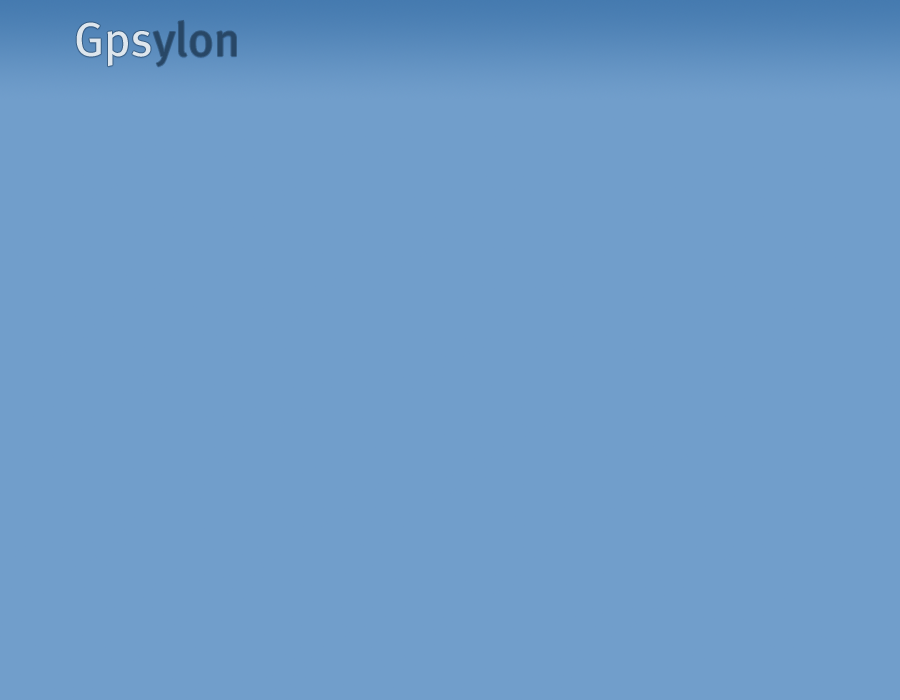
<style>
.page{position:relative;width:900px;height:700px;background:#719ecb}
.page>*{position:absolute;margin:0}
.t1{font:48px "MetaBook-Roman";color:#284766}
.t2{font:48px "MetaBook-Roman";color:#dee6ed}
</style>
<div class="page">
<p class="t1" style="left:76px;top:20px;width:160px;height:47px"><span class="t2">Gps</span>ylon</p>
</div>
